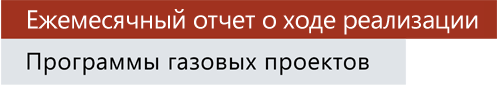
<style>
.page{position:relative;width:500px;height:85px;background:#e0e4e8}
.page>*{position:absolute;margin:0}
.t1{font:26px "SegoeUI";letter-spacing:-0.02em;color:#ffffff}
</style>
<div class="page">
<p class="t1" style="left:28px;top:9px;width:450px;height:26px">Ежемесячный отчет о ходе реализации</p>
</div>
